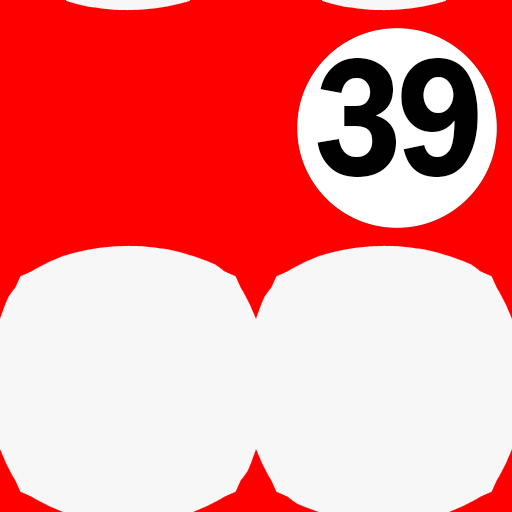
<style>
.page{position:relative;width:512px;height:512px;background:#f7f7f7}
.page>*{position:absolute;margin:0}
.t1{font:172.5px "FranklinGothic-Demi";letter-spacing:-0.05em;color:#010101;scale:0.87 1}
</style>
<div class="page">
<p class="t1" style="left:317px;top:58px;width:161px;height:119px">39</p>
</div>
